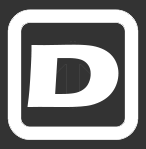
<style>
.page{position:relative;width:146px;height:149px;background:#333333}
.page>*{position:absolute;margin:0}
.t1{font:93.1px "ErasITC-Bold";color:#ffffff;scale:1.41 1}
</style>
<div class="page">
<p class="t1" style="left:27px;top:44px;width:92px;height:63px">D</p>
</div>
